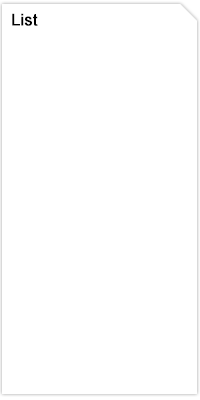
<style>
.page{position:relative;width:200px;height:400px;background:#ffffff}
.page>*{position:absolute;margin:0}
.t1{font:15.9px "ArialMT";color:#000000;font-weight:bold}
</style>
<div class="page">
<p class="t1" style="left:12px;top:13px;width:26px;height:13px">List</p>
</div>
